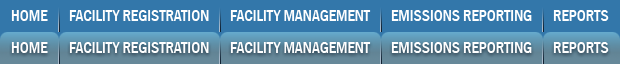
<style>
.page{position:relative;width:620px;height:64px;background:#3377aa}
.page>*{position:absolute;margin:0}
.t1{font:16px "FranklinGothic-MediumCond";color:#fffefe}
.t2{font:16px "FranklinGothic-MediumCond";color:#ffffff}
</style>
<div class="page">
<p class="t1" style="left:11px;top:10px;width:37px;height:11px">HOME</p>
<p class="t2" style="left:69px;top:10px;width:140px;height:11px">FACILITY REGISTRATION</p>
<p class="t2" style="left:230px;top:10px;width:141px;height:11px">FACILITY MANAGEMENT</p>
<p class="t2" style="left:391px;top:10px;width:141px;height:11px">EMISSIONS REPORTING</p>
<p class="t2" style="left:553px;top:10px;width:56px;height:11px">REPORTS</p>
<p class="t1" style="left:11px;top:42px;width:37px;height:11px">HOME</p>
<p class="t2" style="left:69px;top:42px;width:140px;height:11px">FACILITY REGISTRATION</p>
<p class="t2" style="left:230px;top:42px;width:141px;height:11px">FACILITY MANAGEMENT</p>
<p class="t2" style="left:391px;top:42px;width:141px;height:11px">EMISSIONS REPORTING</p>
<p class="t2" style="left:553px;top:42px;width:56px;height:11px">REPORTS</p>
</div>
